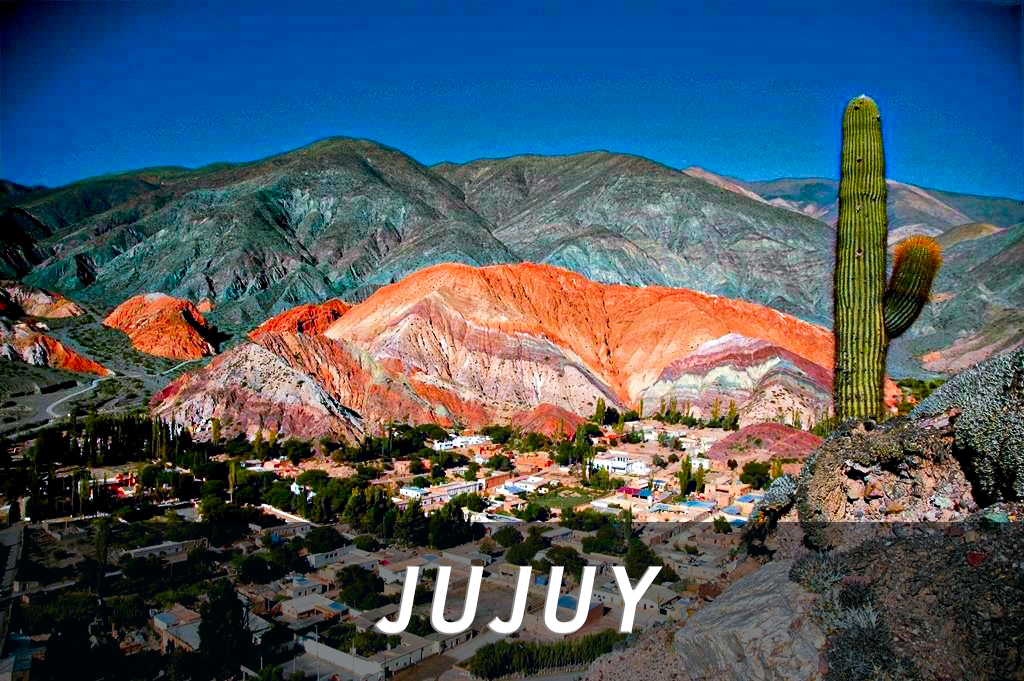
<style>
.page{position:relative;width:1024px;height:681px}
.page>*{position:absolute;margin:0}
.t1{font:92.4px "CenturyGothic-Bold";letter-spacing:0.05em;color:#ffffff;font-style:italic}
</style>
<div class="page">
<p class="t1" style="left:373px;top:566px;width:290px;height:69px">JUJUY</p>
</div>
